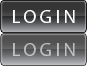
<style>
.page{position:relative;width:87px;height:66px}
.page>*{position:absolute;margin:0}
.t1{font:18.7px "MyriadPro-Regular";letter-spacing:0.2em;color:#ffffff}
.t2{font:18.7px "MyriadPro-Regular";letter-spacing:0.2em;color:#bebfbf}
</style>
<div class="page">
<p class="t1" style="left:13px;top:10px;width:62px;height:13px;opacity:0.6">LOGIN</p>
<p class="t1" style="left:13px;top:10px;width:62px;height:13px">LOGIN</p>
<p class="t2" style="left:13px;top:43px;width:62px;height:13px">LOGIN</p>
</div>
